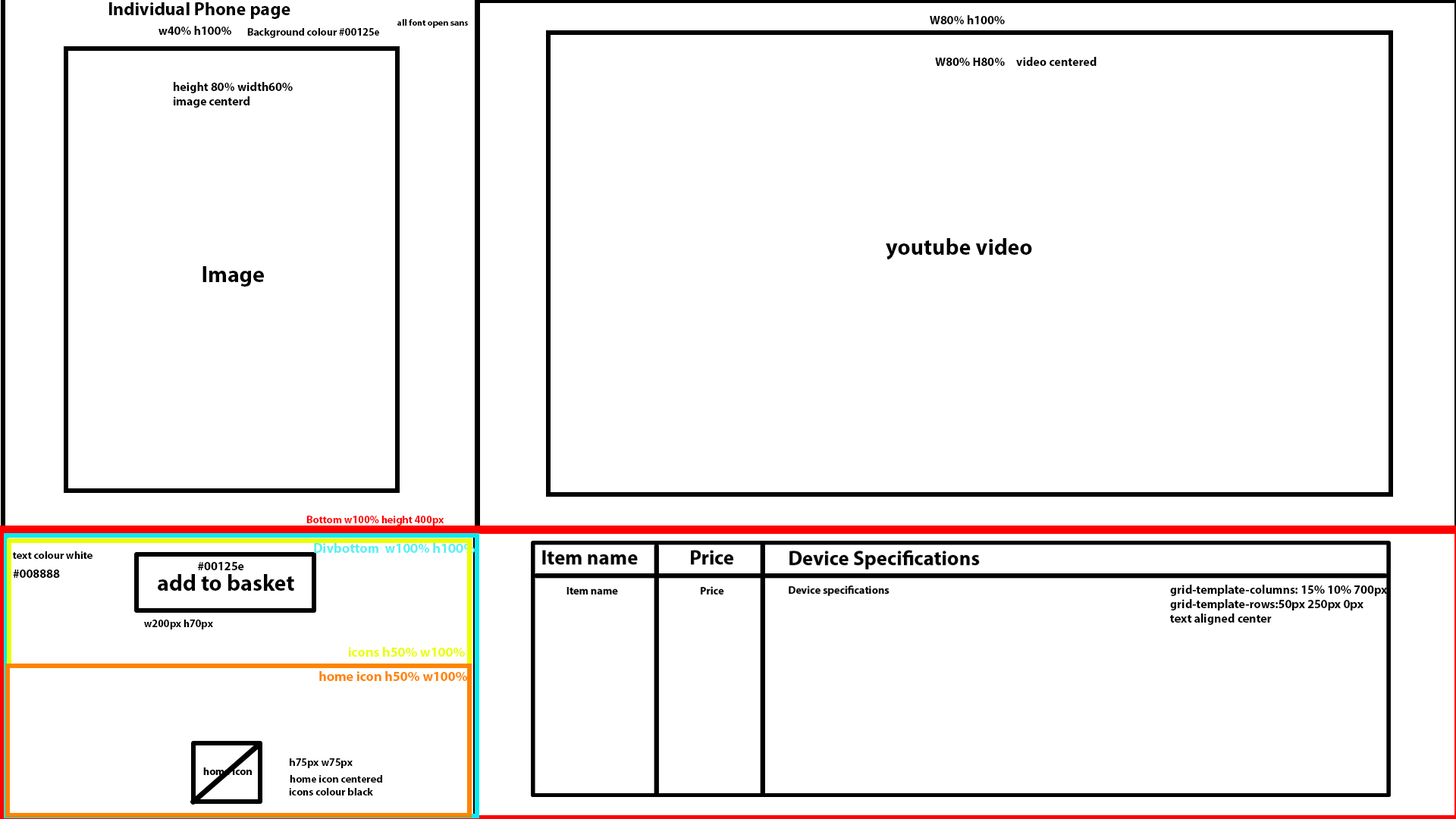
<style>
.page{position:relative;width:1456px;height:819px;background:#ffffff}
.page>*{position:absolute;margin:0}
.t1{font:18.2px "MyriadPro-Bold";color:#000000}
.t2{font:12.1px "MyriadPro-Bold";color:#000000}
.t3{font:10.6px "MyriadPro-Bold";color:#000000}
.t4{font:9.1px "MyriadPro-Bold";color:#000000}
.t5{font:22.7px "MyriadPro-Bold";color:#000000}
.t6{font:10.6px "MyriadPro-Bold";color:#ff0000}
.t7{font:13.6px "MyriadPro-Bold";color:#5af1f4}
.t8{font:13.6px "MyriadPro-Bold";color:#eaff00}
.t9{font:13.6px "MyriadPro-Bold";color:#ff8400}
</style>
<div class="page">
<p class="t1" style="left:109px;top:2px;width:181px;height:17px">Individual Phone page</p>
<p class="t2" style="left:930px;top:15px;width:75px;height:9px">W80% h100%</p>
<p class="t2" style="left:158px;top:26px;width:73px;height:9px">w40% h100%</p>
<p class="t3" style="left:247px;top:28px;width:132px;height:10px">Background colour #00125e</p>
<p class="t4" style="left:397px;top:19px;width:71px;height:9px">all font open sans</p>
<p class="t2" style="left:935px;top:58px;width:70px;height:8px">W80% H80%</p>
<p class="t2" style="left:1016px;top:57px;width:81px;height:9px">video centered</p>
<p class="t2" style="left:174px;top:82px;width:119px;height:26px">height 80% width60%<br>image centerd</p>
<p class="t5" style="left:886px;top:238px;width:146px;height:22px">youtube video</p>
<p class="t5" style="left:202px;top:266px;width:62px;height:21px">Image</p>
<p class="t6" style="left:306px;top:516px;width:138px;height:10px">Bottom w100% height 400px</p>
<p class="t7" style="left:314px;top:543px;width:161px;height:11px">Divbottom  w100% h100%</p>
<p class="t3" style="left:13px;top:551px;width:80px;height:8px">text colour white</p>
<p class="t2" style="left:13px;top:570px;width:47px;height:8px">#008888</p>
<p class="t2" style="left:198px;top:562px;width:46px;height:8px">#00125e</p>
<p class="t5" style="left:158px;top:574px;width:136px;height:17px">add to basket</p>
<p class="t2" style="left:1170px;top:585px;width:220px;height:40px">grid-template-columns: 15% 10% 700px;<br>grid-template-rows:50px 250px 0px<br>text aligned center</p>
<p class="t3" style="left:144px;top:620px;width:69px;height:9px">w200px h70px</p>
<p class="t8" style="left:349px;top:647px;width:116px;height:10px">icons h50% w100%</p>
<p class="t9" style="left:319px;top:671px;width:148px;height:10px">home icon h50% w100%</p>
<p class="t3" style="left:290px;top:758px;width:63px;height:10px">h75px w75px</p>
<p class="t3" style="left:290px;top:775px;width:92px;height:8px">home icon centered</p>
<p class="t3" style="left:289px;top:788px;width:84px;height:7px">icons colour black</p>
</div>
